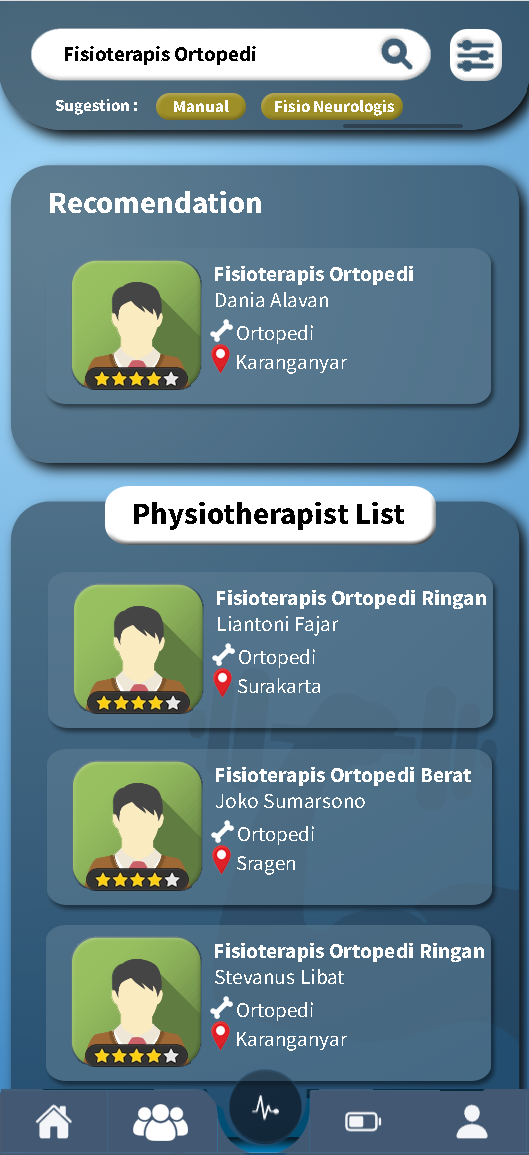
<style>
.page{position:relative;width:529px;height:1155px}
.page>*{position:absolute;margin:0}
.t1{font:21px "SourceSansPro-Bold";color:#000000}
.t2{font:17px "SourceSansPro-Bold";color:#ffffff}
.t3{font:31px "SourceSansPro-Bold";color:#ffffff}
.t4{font:21.3px "SourceSansPro-Bold";color:#ffffff}
.t5{font:21.3px "SourceSansPro-Regular";color:#ffffff}
.t6{font:21px "SourceSansPro-Regular";color:#ffffff}
.t7{font:31px "SourceSansPro-Bold";color:#000000}
</style>
<div class="page">
<p class="t1" style="left:65px;top:46px;width:191px;height:19px">Fisioterapis Ortopedi</p>
<p class="t2" style="left:56px;top:99px;width:81px;height:16px">Sugestion :</p>
<p class="t2" style="left:174px;top:100px;width:55px;height:12px">Manual</p>
<p class="t2" style="left:275px;top:100px;width:119px;height:16px">Fisio Neurologis</p>
<p class="t3" style="left:50px;top:191px;width:211px;height:22px">Recomendation</p>
<p class="t4" style="left:215px;top:266px;width:198px;height:19px">Fisioterapis Ortopedi</p>
<p class="t5" style="left:216px;top:292px;width:112px;height:15px">Dania Alavan</p>
<p class="t6" style="left:237px;top:325px;width:76px;height:19px">Ortopedi</p>
<p class="t6" style="left:237px;top:355px;width:110px;height:19px">Karanganyar</p>
<p class="t7" style="left:134px;top:502px;width:270px;height:28px">Physiotherapist List</p>
<p class="t4" style="left:217px;top:590px;width:269px;height:19px">Fisioterapis Ortopedi Ringan</p>
<p class="t5" style="left:218px;top:616px;width:120px;height:20px">Liantoni Fajar</p>
<p class="t6" style="left:239px;top:649px;width:76px;height:19px">Ortopedi</p>
<p class="t6" style="left:238px;top:678px;width:82px;height:15px">Surakarta</p>
<p class="t4" style="left:216px;top:767px;width:255px;height:19px">Fisioterapis Ortopedi Berat</p>
<p class="t5" style="left:216px;top:793px;width:149px;height:15px">Joko Sumarsono</p>
<p class="t6" style="left:238px;top:826px;width:76px;height:19px">Ortopedi</p>
<p class="t6" style="left:237px;top:856px;width:58px;height:19px">Sragen</p>
<p class="t4" style="left:215px;top:943px;width:269px;height:19px">Fisioterapis Ortopedi Ringan</p>
<p class="t5" style="left:215px;top:969px;width:129px;height:15px">Stevanus Libat</p>
<p class="t6" style="left:237px;top:1002px;width:76px;height:19px">Ortopedi</p>
<p class="t6" style="left:237px;top:1032px;width:110px;height:19px">Karanganyar</p>
</div>
